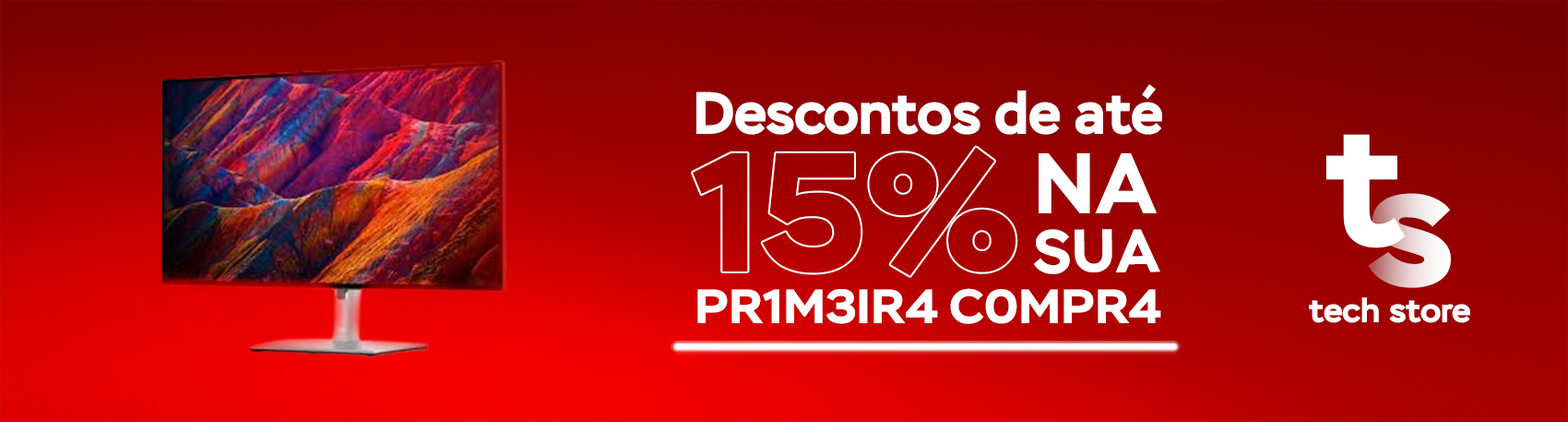
<style>
.page{position:relative;width:1568px;height:422px}
.page>*{position:absolute;margin:0}
.t1{font:59.4px "Stem-Bold";color:#ffffff}
.t2{font:174.6px "Stem-Bold";color:#ffffff}
.t3{font:85.5px "Stem-Bold";color:#ffffff}
.t4{font:174.6px "Stem-Bold"}
.t5{font:60.9px "Stem-Bold";color:#ffffff}
.t6{font:48.3px "Stem-Bold";color:#ffffff;scale:1.03 1}
.t7{font:33.8px "Stem-Bold";color:#ffffff}
</style>
<div class="page">
<p class="t1" style="left:696px;top:84px;width:466px;height:51px">Descontos de até</p>
<p class="t2" style="left:1325px;top:134px;width:80px;height:114px">t</p>
<p class="t3" style="left:1039px;top:153px;width:118px;height:60px">NA</p>
<p class="t4" style="left:1368px;top:193px;width:83px;height:95px">s</p>
<p class="t5" style="left:1034px;top:229px;width:126px;height:45px;rotate:-1deg">SUA</p>
<p class="t6" style="left:697px;top:288px;width:464px;height:36px">PR1M3IR4 C0MPR4</p>
<p class="t7" style="left:1309px;top:297px;width:161px;height:26px">tech store</p>
</div>
